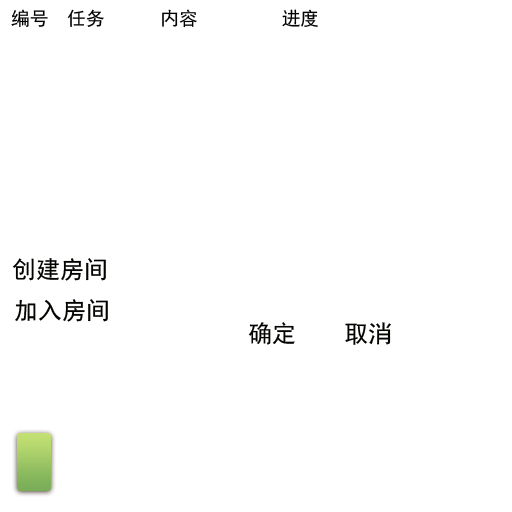
<style>
.page{position:relative;width:512px;height:512px;background:#ffffff}
.page>*{position:absolute;margin:0}
.t1{font:18.7px "SimHei";color:#000000}
.t2{font:24px "SimHei";color:#030300}
</style>
<div class="page">
<p class="t1" style="left:11px;top:9px;width:307px;height:19px">编号  任务      内容         进度</p>
<p class="t2" style="left:12px;top:258px;width:94px;height:23px">创建房间</p>
<p class="t2" style="left:15px;top:299px;width:93px;height:23px">加入房间</p>
<p class="t2" style="left:248px;top:322px;width:143px;height:23px">确定    取消</p>
</div>
